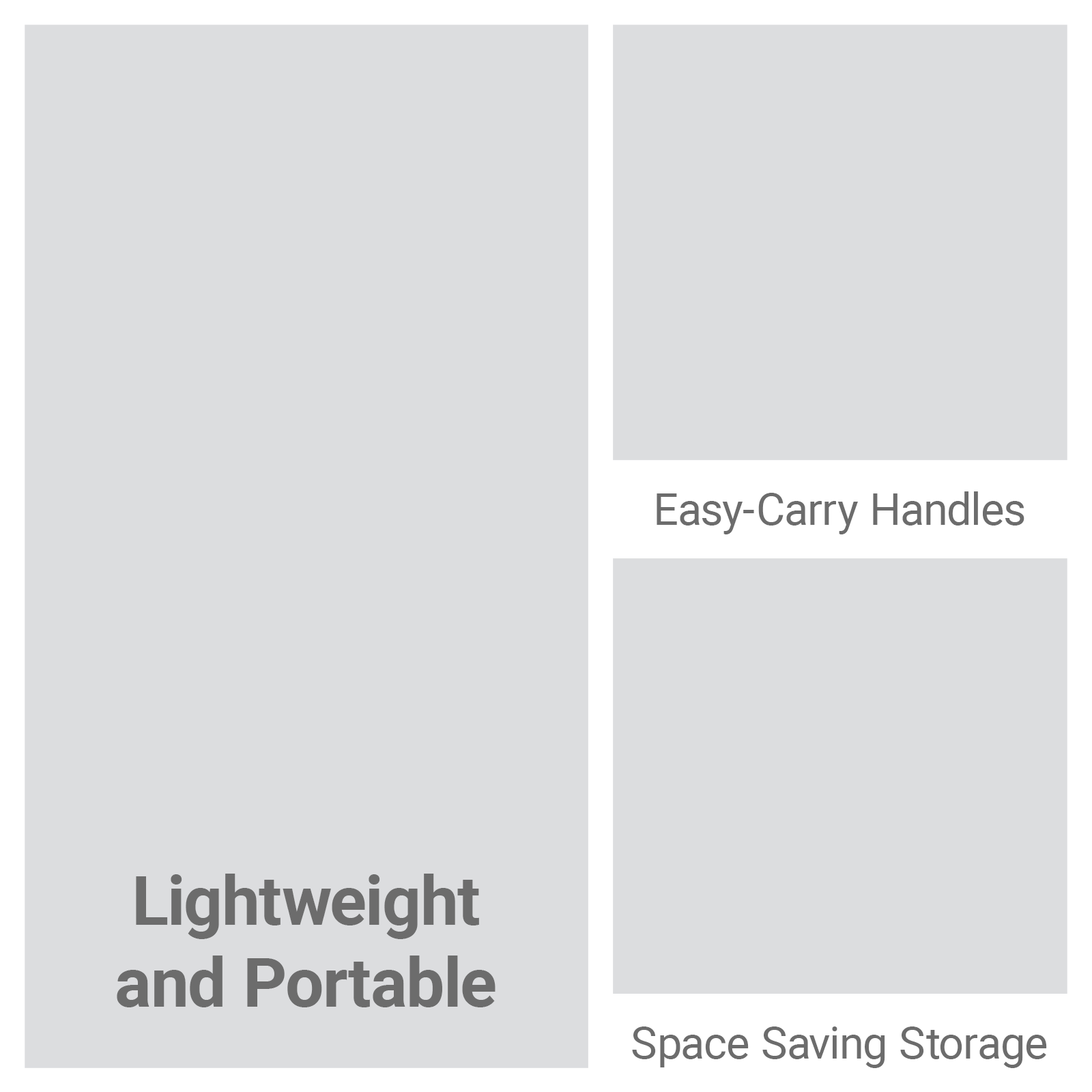
<style>
.page{position:relative;width:1092px;height:1092px;background:#dcdddf}
.page>*{position:absolute;margin:0}
.t1{font:44.5px "Roboto-Regular";color:#6c6c6c}
.t2{font:68.2px "Roboto-Bold";color:#6c6c6c}
</style>
<div class="page">
<p class="t1" style="left:657px;top:491px;width:367px;height:43px">Easy-Carry Handles</p>
<p class="t2" style="left:117px;top:874px;width:378px;height:133px;text-align:center">Lightweight<br>and Portable</p>
<p class="t1" style="left:632px;top:1026px;width:415px;height:42px">Space Saving Storage</p>
</div>
